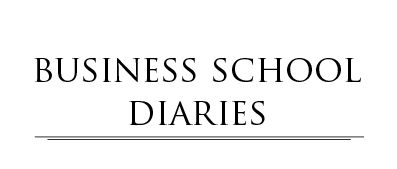
<style>
.page{position:relative;width:397px;height:169px;background:#ffffff}
.page>*{position:absolute;margin:0}
.t1{font:36px "TrajanPro-Regular";color:#000000}
</style>
<div class="page">
<p class="t1" style="left:34px;top:57px;width:327px;height:69px;text-align:center">business school<br>diaries</p>
</div>
